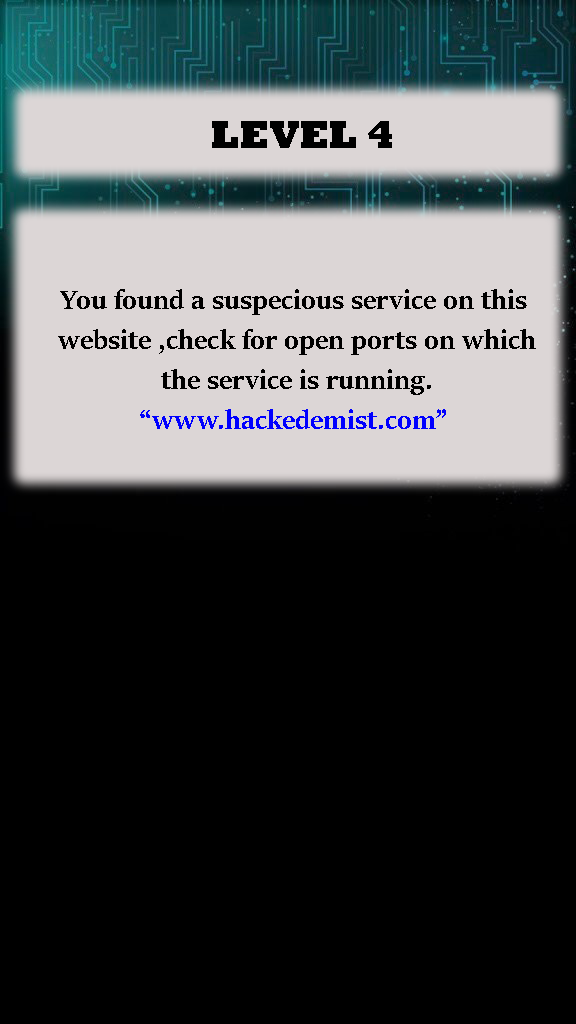
<style>
.page{position:relative;width:576px;height:1024px;background:#000000}
.page>*{position:absolute;margin:0}
.t1{font:40px "Rockwell-ExtraBold";color:#000000}
.t2{font:30px/10px "SitkaBanner-Bold";color:#000000}
.t3{font:30px/10px "SitkaBanner-Bold";color:#0000ff}
</style>
<div class="page">
<p class="t1" style="left:212px;top:121px;width:180px;height:27px">LEVEL 4</p>
<p class="t2" style="left:58px;top:289px;width:478px;height:140px;text-align:center">You found a suspecious service on this<br><br><br><br> website ,check for open ports on which<br><br><br><br> the service is running.<br> <br><br><br><span class="t3">“www.hackedemist.com”</span></p>
</div>
